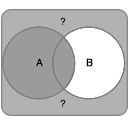
<style>
.page{position:relative;width:128px;height:128px;background:#ffffff}
.page>*{position:absolute;margin:0}
.t1{font:9.6px "Helvetica";color:#000000;font-weight:bold}
.t2{font:10px "Helvetica";color:#000000;font-weight:bold}
</style>
<div class="page">
<p class="t1" style="left:60px;top:17px;width:6px;height:8px">?</p>
<p class="t2" style="left:36px;top:58px;width:7px;height:9px">A</p>
<p class="t2" style="left:86px;top:58px;width:7px;height:9px">B</p>
<p class="t1" style="left:60px;top:99px;width:6px;height:8px">?</p>
</div>
